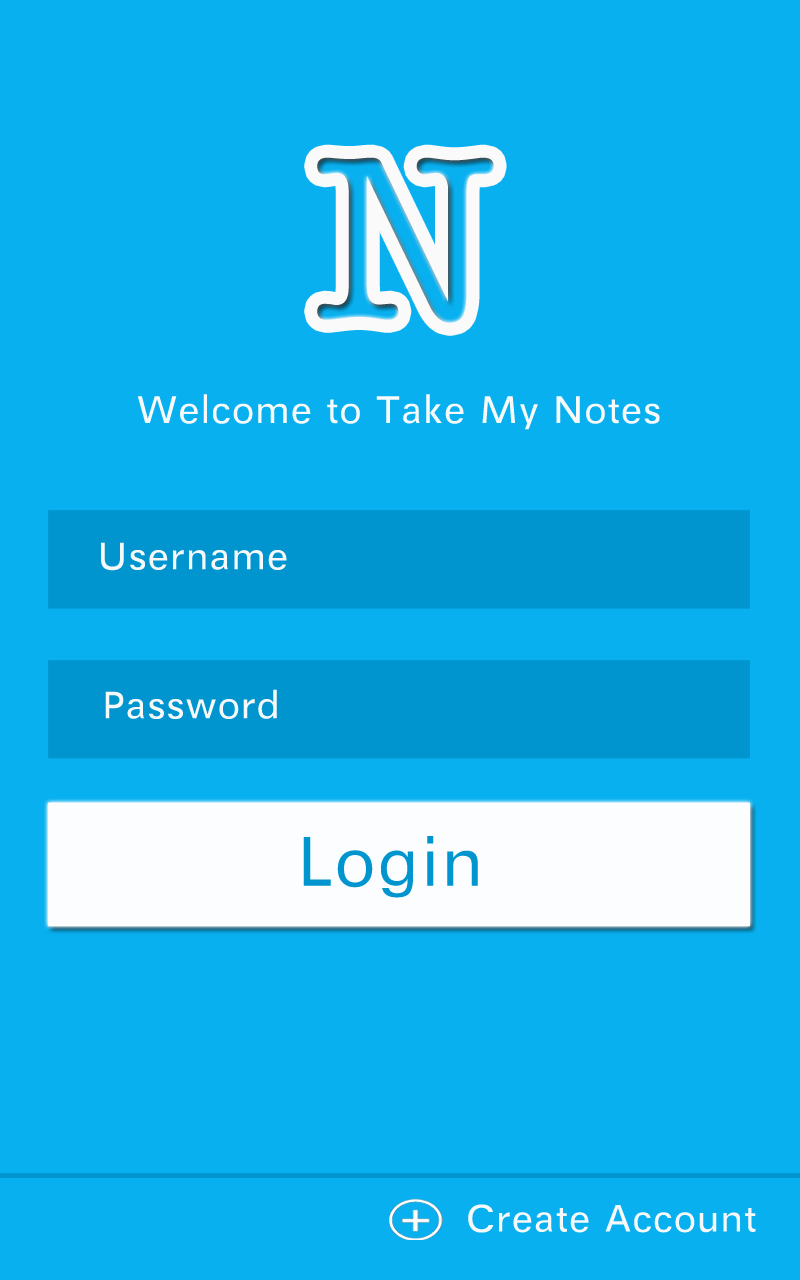
<style>
.page{position:relative;width:800px;height:1280px;background:#08b0ef}
.page>*{position:absolute;margin:0}
.t1{font:239.6px "AmericanTypewriter"}
.t2{font:39.6px "SIL-Hei-Med-Jian";color:#f7fafb}
.t3{font:39.6px "SIL-Hei-Med-Jian";color:#f6f9fa}
.t4{font:72.9px "SIL-Hei-Med-Jian";color:#0095cf}
</style>
<div class="page">
<p class="t1" style="left:317px;top:157px;width:177px;height:166px">N</p>
<p class="t2" style="left:138px;top:394px;width:522px;height:36px">Welcome to Take My Notes</p>
<p class="t3" style="left:101px;top:542px;width:186px;height:29px">Username</p>
<p class="t3" style="left:105px;top:689px;width:172px;height:30px">Password</p>
<p class="t4" style="left:303px;top:836px;width:175px;height:62px">Login</p>
<p class="t3" style="left:468px;top:1204px;width:288px;height:29px">Create Account</p>
</div>
